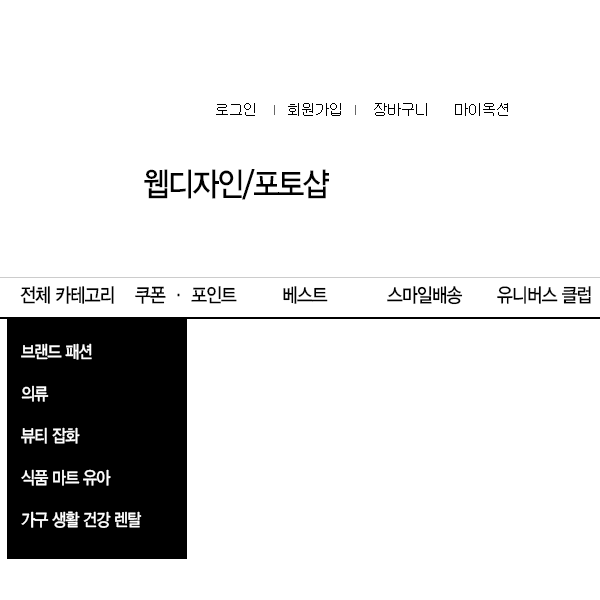
<style>
.page{position:relative;width:600px;height:600px;background:#ffffff}
.page>*{position:absolute;margin:0}
.t1{font:14px "Gulim";color:#000000}
.t2{font:33px "YDIYGO330";letter-spacing:-0.05em;color:#000000;scale:0.86 1}
.t3{font:19.8px "YDIYGO330";letter-spacing:-0.05em;color:#000000;scale:0.86 1}
.t4{font:17.6px/42px "YDIYGO330";letter-spacing:-0.05em;color:#ffffff;scale:0.86 1}
</style>
<div class="page">
<p class="t1" style="left:216px;top:103px;width:292px;height:13px">로그인      회원가입      장바구니     마이옥션</p>
<p class="t2" style="left:144px;top:169px;width:185px;height:31px">웹디자인/포토샵</p>
<p class="t3" style="left:20px;top:286px;width:94px;height:18px">전체 카테고리</p>
<p class="t3" style="left:135px;top:286px;width:102px;height:18px">쿠폰 · 포인트</p>
<p class="t3" style="left:283px;top:286px;width:45px;height:18px">베스트</p>
<p class="t3" style="left:387px;top:286px;width:76px;height:19px">스마일배송</p>
<p class="t3" style="left:497px;top:286px;width:94px;height:18px">유니버스 클럽</p>
<p class="t4" style="left:21px;top:343px;width:121px;height:185px">브랜드 패션<br>의류<br>뷰티 잡화<br>식품 마트 유아<br>가구 생활 건강 렌탈</p>
</div>
